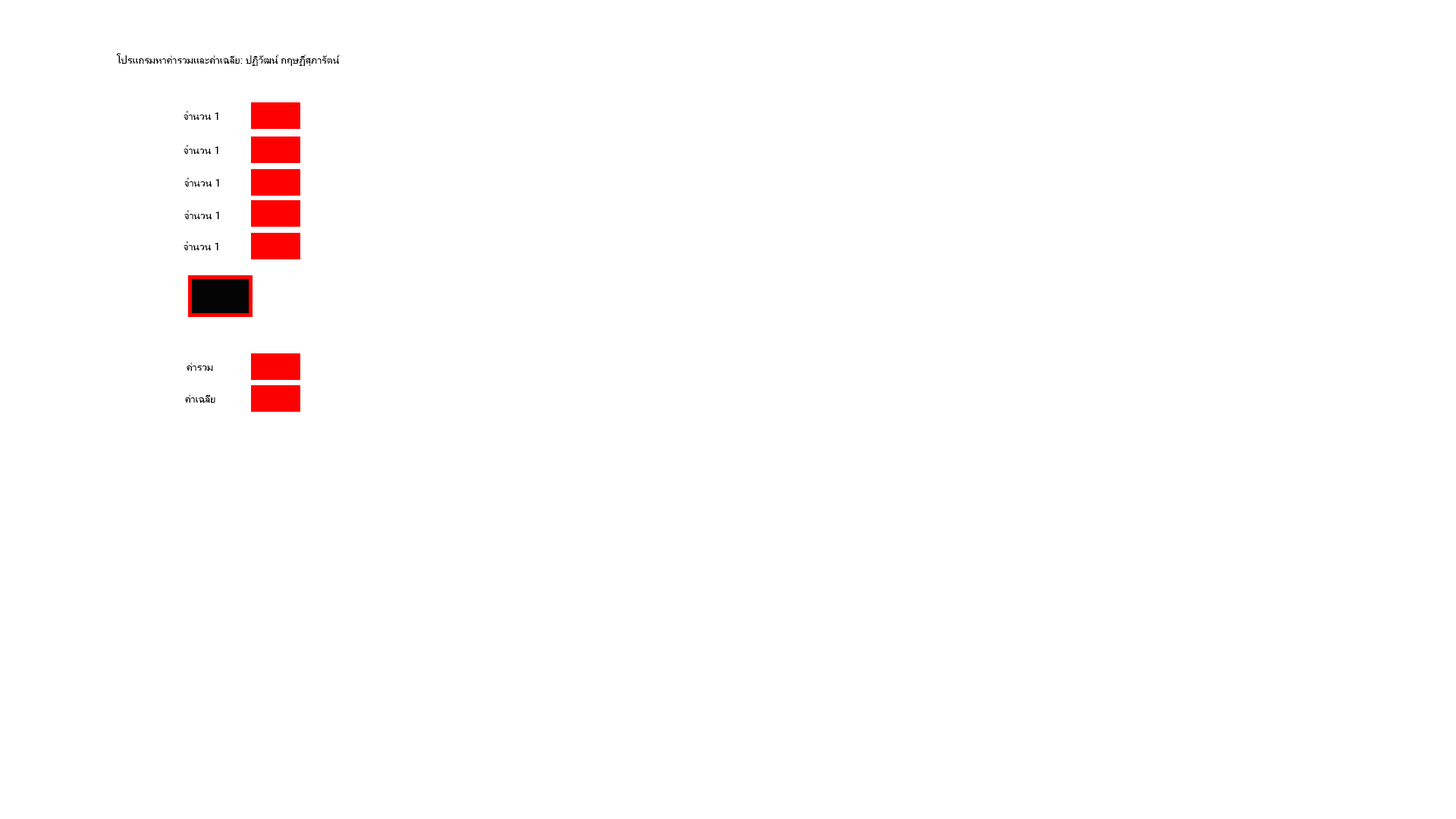
<style>
.page{position:relative;width:1456px;height:819px;background:#ffffff}
.page>*{position:absolute;margin:0}
.t1{font:10.6px "MicrosoftSansSerif";color:#000000}
</style>
<div class="page">
<p class="t1" style="left:116px;top:53px;width:224px;height:13px">โปรแกรมหาค่ารวมและค่าเฉลี่ย: ปฏิวัฒน์ กฤษฏิ์สุภารัตน์</p>
<p class="t1" style="left:184px;top:111px;width:34px;height:9px">จำนวน 1</p>
<p class="t1" style="left:184px;top:145px;width:34px;height:9px">จำนวน 1</p>
<p class="t1" style="left:184px;top:177px;width:35px;height:10px">จำนวน 1</p>
<p class="t1" style="left:184px;top:210px;width:35px;height:9px">จำนวน 1</p>
<p class="t1" style="left:184px;top:241px;width:34px;height:9px">จำนวน 1</p>
<p class="t1" style="left:187px;top:362px;width:26px;height:9px">ค่ารวม</p>
<p class="t1" style="left:185px;top:394px;width:30px;height:9px">ค่าเฉลี่ย</p>
</div>
